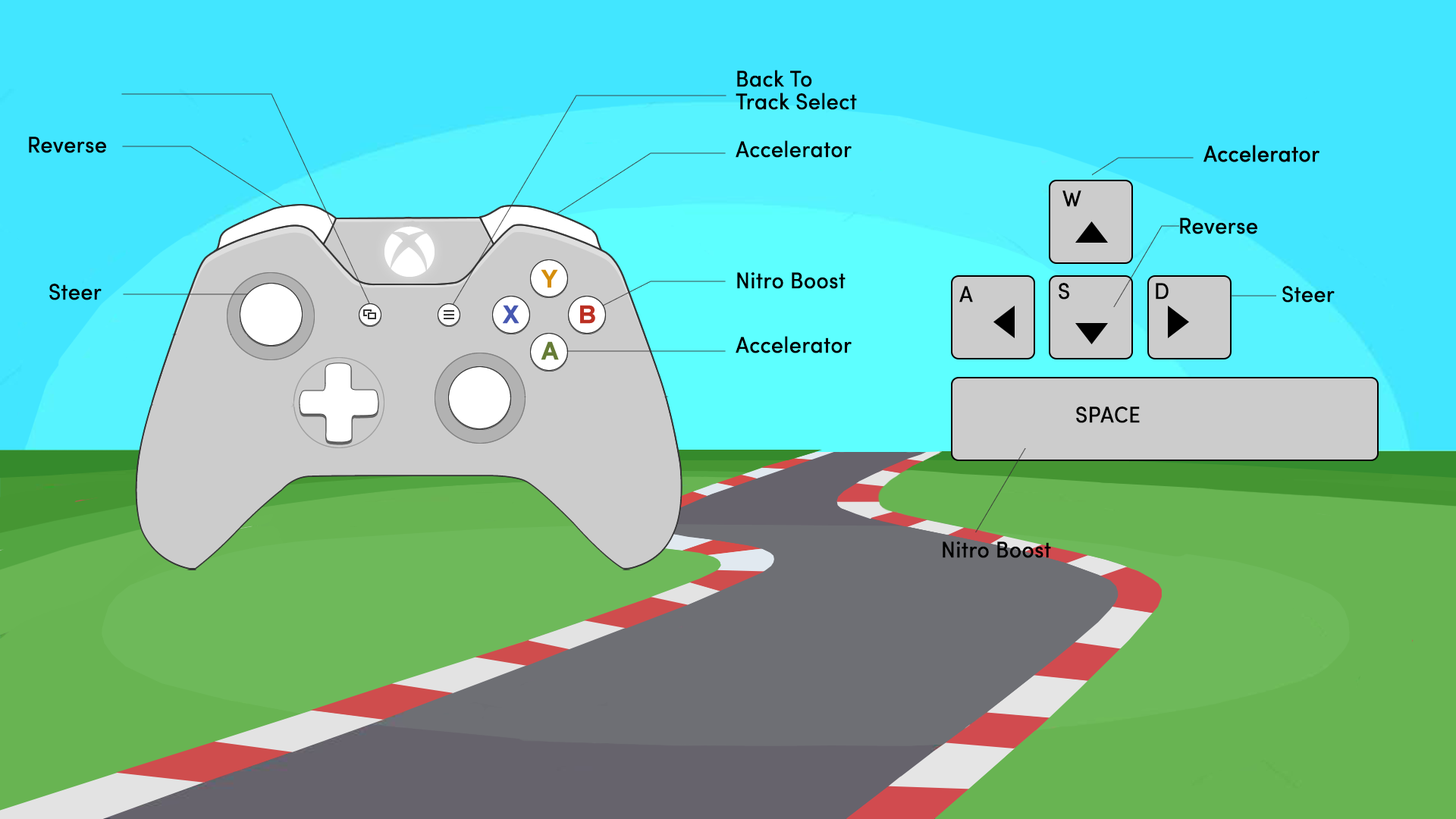
<style>
.page{position:relative;width:1456px;height:819px;background:#42e6ff}
.page>*{position:absolute;margin:0}
.t1{font:22.7px/22.7px "SofiaProRegularCondensed";letter-spacing:0.02em;color:#000000;scale:1.08 1}
.t2{font:22.7px "SofiaProRegularCondensed";letter-spacing:0.02em;color:#000000;scale:1.08 1}
</style>
<div class="page">
<p class="t1" style="left:736px;top:70px;width:121px;height:40px">Back To <br>Track Select</p>
<p class="t2" style="left:29px;top:136px;width:77px;height:17px">Reverse</p>
<p class="t2" style="left:736px;top:140px;width:116px;height:18px">Accelerator</p>
<p class="t2" style="left:1062px;top:190px;width:19px;height:17px">W</p>
<p class="t2" style="left:1180px;top:218px;width:77px;height:16px">Reverse</p>
<p class="t2" style="left:737px;top:272px;width:109px;height:17px">Nitro Boost</p>
<p class="t2" style="left:49px;top:284px;width:53px;height:16px">Steer</p>
<p class="t2" style="left:959px;top:286px;width:14px;height:17px">A</p>
<p class="t2" style="left:1059px;top:283px;width:10px;height:17px">S</p>
<p class="t2" style="left:1156px;top:283px;width:13px;height:17px">D</p>
<p class="t2" style="left:1282px;top:286px;width:53px;height:17px">Steer</p>
<p class="t2" style="left:736px;top:336px;width:116px;height:17px">Accelerator</p>
<p class="t2" style="left:1076px;top:406px;width:64px;height:17px">SPACE</p>
<p class="t2" style="left:943px;top:541px;width:108px;height:17px">Nitro Boost</p>
</div>
